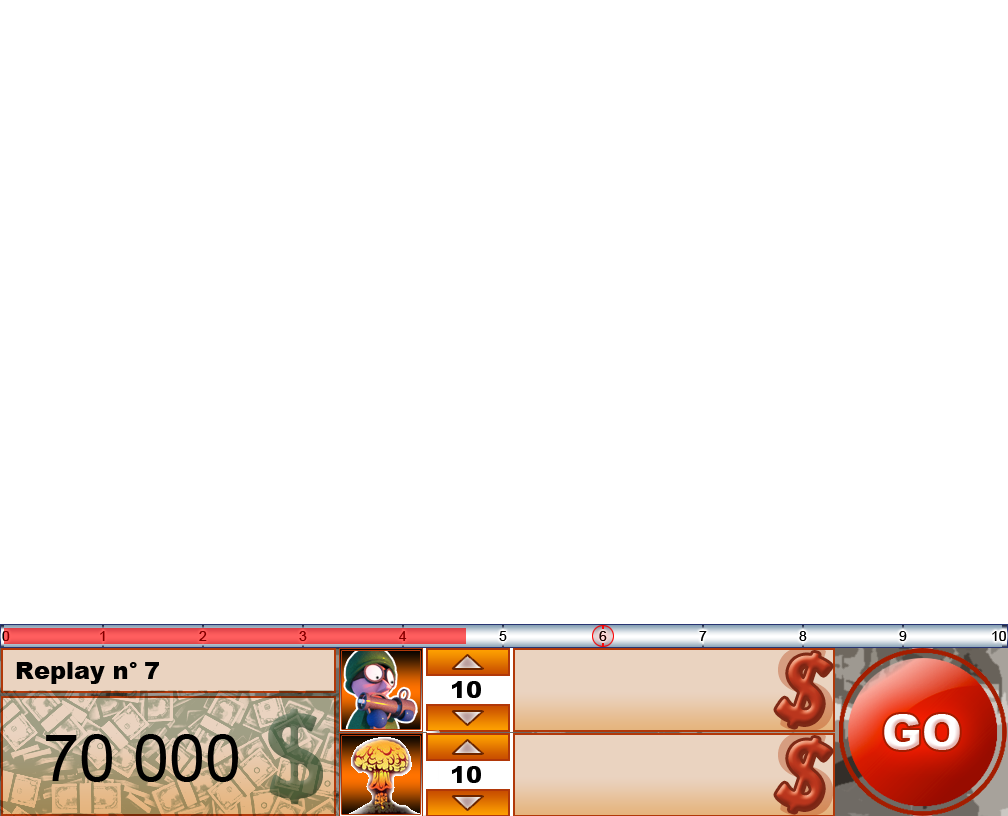
<style>
.page{position:relative;width:1008px;height:816px;background:#ffffff}
.page>*{position:absolute;margin:0}
.t1{font:24px "Arial-Black";color:#000000}
.t2{font:102.1px "HoboStd"}
.t3{font:64.7px "ArialMT";color:#000000}
</style>
<div class="page">
<p class="t1" style="left:16px;top:662px;width:121px;height:22px">Replay n°</p>
<p class="t1" style="left:145px;top:662px;width:14px;height:17px">7</p>
<p class="t1" style="left:452px;top:681px;width:29px;height:17px">10</p>
<p class="t2" style="left:268px;top:708px;width:55px;height:97px">$</p>
<p class="t3" style="left:46px;top:734px;width:192px;height:48px">70 000</p>
<p class="t1" style="left:452px;top:766px;width:29px;height:17px">10</p>
</div>
